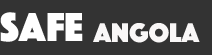
<style>
.page{position:relative;width:212px;height:55px;background:#333333}
.page>*{position:absolute;margin:0}
.t1{font:42px "Phosphate-Solid";color:#ffffff}
.t2{font:28px "Phosphate-Solid";color:#f9f7f7}
</style>
<div class="page">
<p class="t1" style="left:0px;top:12px;width:83px;height:30px">SAFE</p>
<p class="t2" style="left:93px;top:23px;width:107px;height:20px">Angola</p>
</div>
